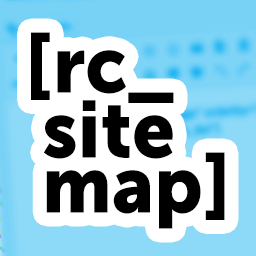
<style>
.page{position:relative;width:256px;height:256px;background:#ffffff}
.page>*{position:absolute;margin:0}
.t1{font:79.9px/72px "MuseoSans-900";color:#000000;scale:0.95 1}
.t2{font:79.9px/65px "MuseoSans-900";color:#000000;scale:0.95 1}
.t3{font:79.9px/55px "MuseoSans-900";color:#000000;scale:0.95 1}
</style>
<div class="page">
<p class="t1" style="left:31px;top:32px;width:194px;height:197px">[rc_<br><span class="t2"> site<br></span><span class="t3"> map]</span></p>
</div>
